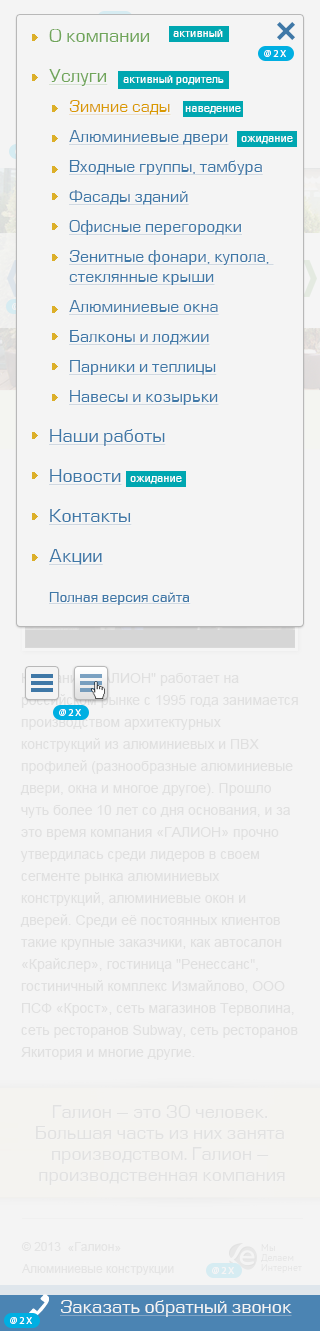
<style>
.page{position:relative;width:320px;height:1331px;background:#f4f4f4}
.page>*{position:absolute;margin:0}
.t1{font:16px/30px "EuropeNormal";color:#3f78a7;text-decoration:underline}
.t2{font:18px/40px "EuropeNormal";color:#70a559}
.t3{font:18px/40px "EuropeNormal";color:#70a559;text-decoration:underline}
.t4{font:16px/30px "EuropeNormal";color:#d99900;text-decoration:underline}
.t5{font:16px/20px "EuropeNormal";color:#3f78a7;text-decoration:underline}
.t6{font:18px/40px "EuropeNormal";color:#3f78a7;text-decoration:underline}
.t7{font:14px/40px "EuropeNormal";color:#3f78a7;text-decoration:underline}
.t8{font:11px "EuropeNormal";color:#ffffff}
.t9{font:10.1px "MyriadPro-Regular";letter-spacing:0.18em;color:#ffffff;text-transform:uppercase}
.t10{font:14px/22px "ArialMT";color:#e0e0e0}
.t11{font:18px/21px "EuropeNormal";color:#e1e1e1}
.t12{font:12px/22px "ArialMT";color:#e4e4e4}
.t13{font:12px/14px "ArialMT";color:#e4e4e4}
.t14{font:10px/10px "PTSans-Regular"}
.t15{font:18px "EuropeNormal";color:#f4f4f4;text-decoration:underline}
</style>
<div class="page">
<p class="t1" style="left:49px;top:29px;width:225px;height:576px"><span class="t2">О компании<br></span><span class="t3">Услуги<br></span><span class="t4">Зимние сады<br></span>Алюминиевые двери<br>Входные группы, тамбура<br>Фасады зданий<br>Офисные перегородки<br>Зенитные фонари, купола, <br><span class="t5">стеклянные крыши<br></span>Алюминиевые окна<br>Балконы и лоджии<br>Парники и теплицы<br>Навесы и козырьки<br><span class="t6">Наши работы<br>Новости<br>Контакты<br>Акции<br></span><span class="t7">Полная версия сайта</span></p>
<p class="t8" style="left:173px;top:29px;width:50px;height:8px">активный</p>
<p class="t9" style="left:264px;top:50px;width:22px;height:7px">@2X</p>
<p class="t8" style="left:123px;top:75px;width:101px;height:10px">активный родитель</p>
<p class="t8" style="left:185px;top:106px;width:56px;height:8px">наведение</p>
<p class="t8" style="left:241px;top:136px;width:52px;height:8px">ожидание</p>
<p class="t8" style="left:130px;top:476px;width:52px;height:8px">ожидание</p>
<p class="t10" style="left:20px;top:673px;width:278px;height:387px">Компания "ГАЛИОН" работает на российском рынке с 1995 года занимается производством архитектурных конструкций из алюминиевых и ПВХ профилей (разнообразные алюминиевые двери, окна и многое другое). Прошло чуть более 10 лет со дня основания, и за это время компания «ГАЛИОН» прочно утвердилась среди лидеров в своем сегменте рынка алюминиевых конструкций, алюминиевые окон и дверей. Среди её постоянных клиентов такие крупные заказчики, как автосалон «Крайслер», гостиница "Ренессанс", гостиничный комплекс Измайлово, ООО ПСФ «Крост», сеть магазинов Терволина, сеть ресторанов Subway, сеть ресторанов Якитория и многие другие.</p>
<p class="t9" style="left:59px;top:709px;width:22px;height:7px">@2X</p>
<p class="t11" style="left:36px;top:1105px;width:249px;height:80px;text-align:center">Галион – это 30 человек. <br>Большая часть из них занята <br>производством. Галион – <br>производственная компания</p>
<p class="t12" style="left:21px;top:1242px;width:153px;height:33px">© 2013  «Галион»<br>Алюминиевые <span class="t13">конструкции</span></p>
<p class="t14" style="left:261px;top:1244px;width:41px;height:29px">Мы <br>Делаем<br>Интернет</p>
<p class="t9" style="left:212px;top:1267px;width:22px;height:7px">@2X</p>
<p class="t15" style="left:60px;top:1300px;width:232px;height:17px">Заказать обратный звонок</p>
<p class="t9" style="left:10px;top:1317px;width:22px;height:7px">@2X</p>
</div>
